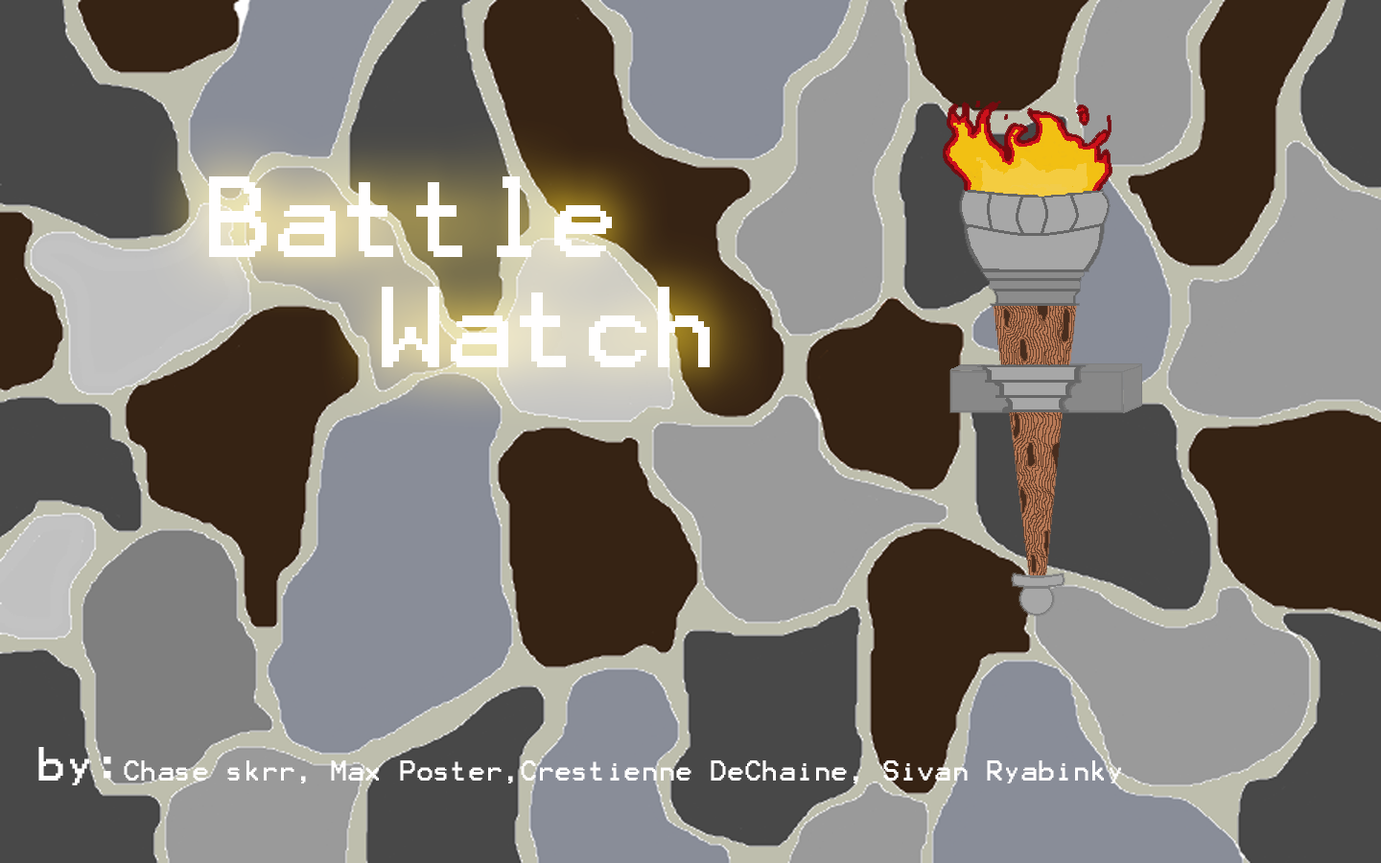
<style>
.page{position:relative;width:1381px;height:863px}
.page>*{position:absolute;margin:0}
.t1{font:92.1px "Terminal";color:#fffefe}
.t2{font:23px "Terminal";color:#fffefe}
.t3{font:38.4px "Terminal";color:#fffefe}
</style>
<div class="page">
<p class="t1" style="left:209px;top:176px;width:501px;height:191px">Battle <br>     Watch</p>
<p class="t2" style="left:38px;top:747px;width:1083px;height:39px"><span class="t3">by:</span>Chase skrr, Max Poster,Crestienne DeChaine, Sivan Ryabinky</p>
</div>
